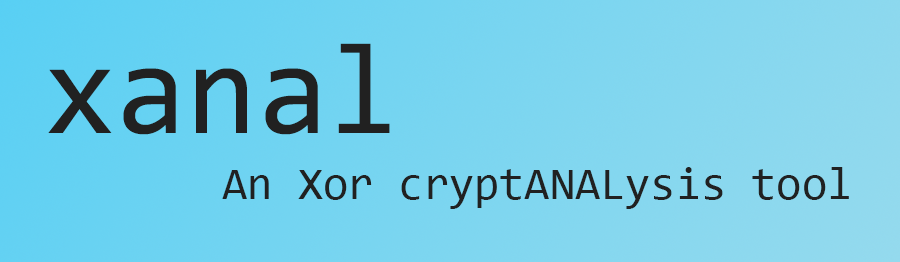
<style>
.page{position:relative;width:900px;height:262px}
.page>*{position:absolute;margin:0}
.t1{font:129.2px "Consolas";color:#212121}
.t2{font:45.8px "Consolas";color:#212121}
</style>
<div class="page">
<p class="t1" style="left:48px;top:43px;width:342px;height:92px">xanal</p>
<p class="t2" style="left:222px;top:167px;width:627px;height:42px">An Xor cryptANALysis tool</p>
</div>
